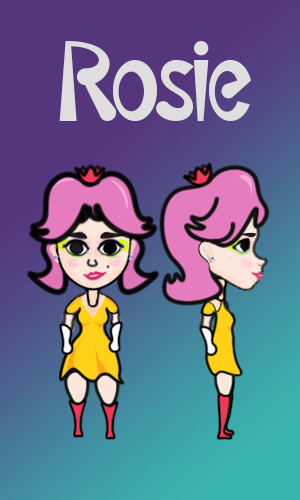
<style>
.page{position:relative;width:300px;height:500px}
.page>*{position:absolute;margin:0}
.t1{font:108.3px "Lippett-Regular";letter-spacing:-0.06em;color:#dedede}
</style>
<div class="page">
<p class="t1" style="left:59px;top:41px;width:192px;height:81px">Rosie</p>
</div>
